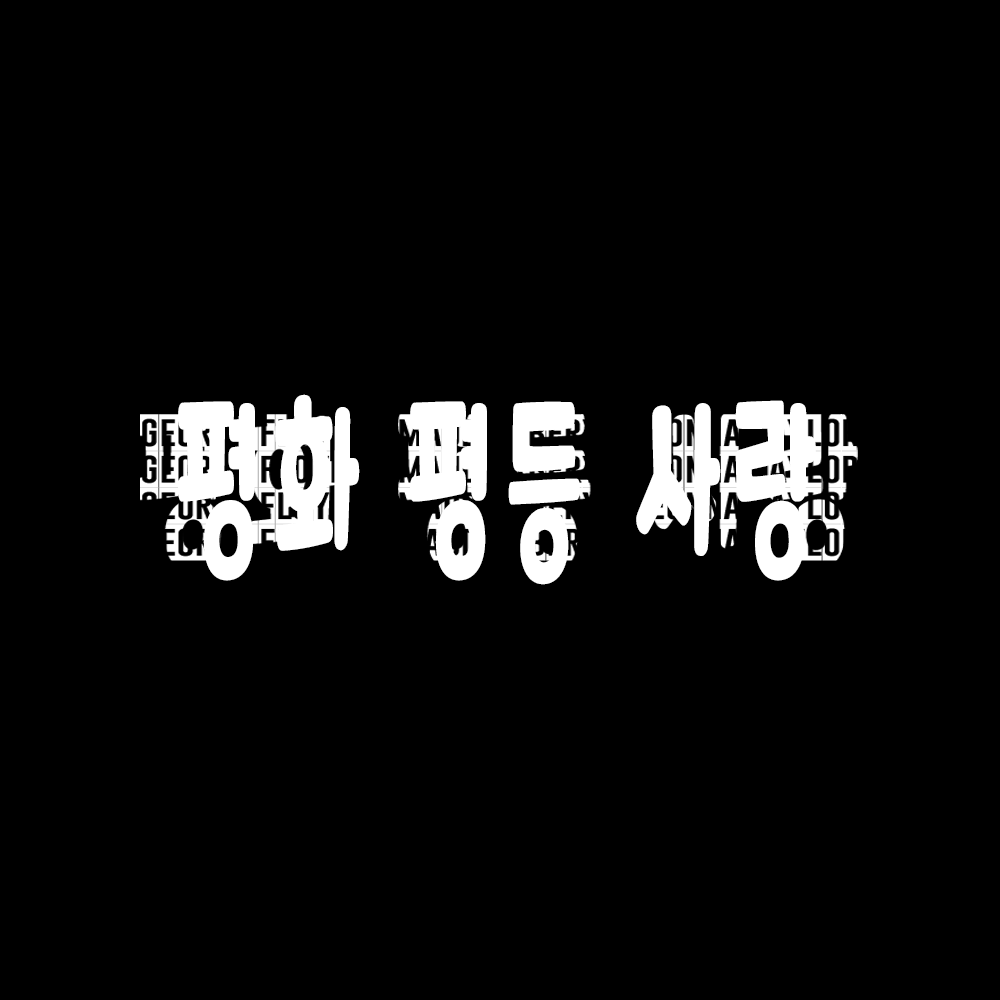
<style>
.page{position:relative;width:1000px;height:1000px;background:#000000}
.page>*{position:absolute;margin:0}
.t1{font:192px "MaplestoryOTFBold";letter-spacing:0.14em;color:#ffffff;scale:0.49 1}
</style>
<div class="page">
<p class="t1" style="left:178px;top:394px;width:638px;height:191px">평화 평등 사랑</p>
</div>
